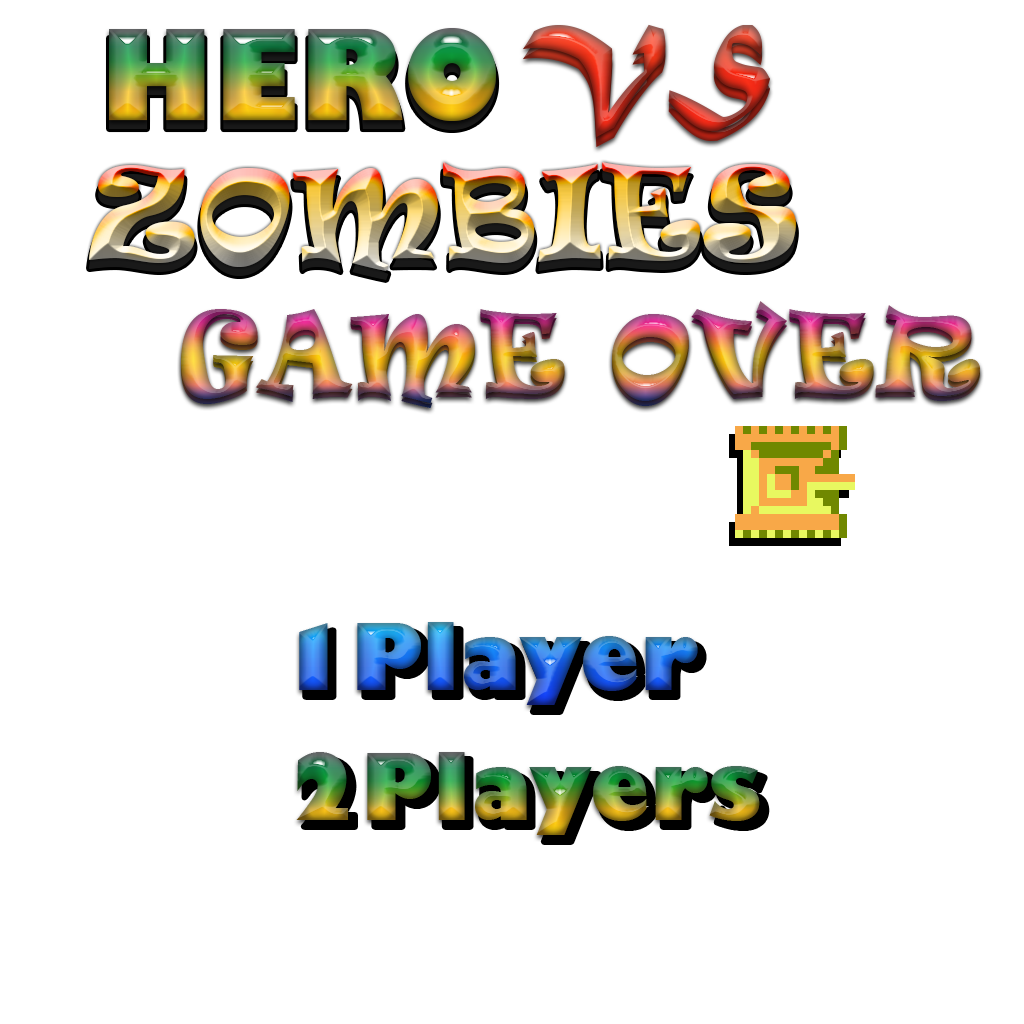
<style>
.page{position:relative;width:1024px;height:1024px;background:#ffffff}
.page>*{position:absolute;margin:0}
.t1{font:121.6px "GillSans-UltraBold";letter-spacing:0.02em;scale:0.95 1}
.t2{font:125.1px "MaturaMTScriptCapitals";letter-spacing:0.02em;scale:0.94 1}
.t3{font:121.6px "Ravie";letter-spacing:0.02em;scale:0.95 1}
.t4{font:104.6px "Ravie";letter-spacing:0.02em;scale:0.95 1}
.t5{font:89.7px "GillSans-UltraBold";letter-spacing:0.02em;scale:0.95 1}
</style>
<div class="page">
<p class="t1" style="left:109px;top:28px;width:388px;height:93px">HERO</p>
<p class="t2" style="left:523px;top:24px;width:247px;height:113px">VS</p>
<p class="t1" style="left:109px;top:37px;width:388px;height:93px">HERO</p>
<p class="t2" style="left:523px;top:34px;width:247px;height:113px">VS</p>
<p class="t3" style="left:89px;top:171px;width:707px;height:109px">ZOMBIES</p>
<p class="t4" style="left:181px;top:301px;width:799px;height:102px">GAME OVER</p>
<p class="t4" style="left:181px;top:306px;width:799px;height:102px">GAME OVER</p>
<p class="t5" style="left:299px;top:622px;width:399px;height:83px">1Player</p>
<p class="t5" style="left:305px;top:629px;width:399px;height:83px">1Player</p>
<p class="t5" style="left:296px;top:752px;width:464px;height:83px">2Players</p>
<p class="t5" style="left:303px;top:759px;width:464px;height:83px">2Players</p>
</div>
